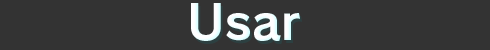
<style>
.page{position:relative;width:490px;height:50px;background:#333333}
.page>*{position:absolute;margin:0}
.t1{font:48px "RodinPro-B";color:#fffeff}
</style>
<div class="page">
<p class="t1" style="left:191px;top:3px;width:109px;height:38px">Usar</p>
</div>
